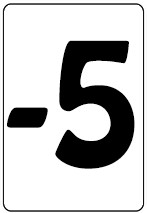
<style>
.page{position:relative;width:147px;height:213px;background:#ffffff}
.page>*{position:absolute;margin:0}
.t1{font:154.6px "HoboStd";color:#000000;scale:1.05 1}
</style>
<div class="page">
<p class="t1" style="left:6px;top:40px;width:129px;height:129px">-5</p>
</div>
